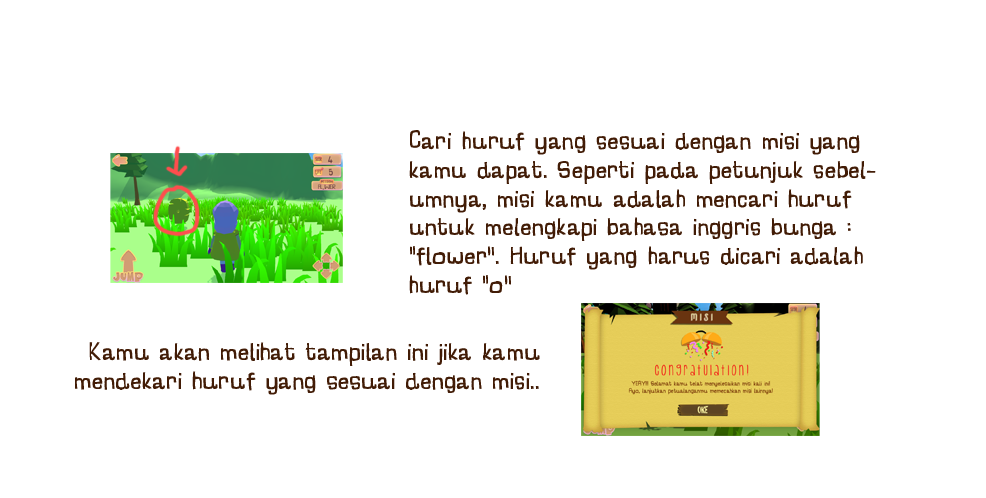
<style>
.page{position:relative;width:986px;height:498px;background:#ffffff}
.page>*{position:absolute;margin:0}
.t1{font:24px "CharlatanDEMO";letter-spacing:0.025em;color:#421c06}
</style>
<div class="page">
<p class="t1" style="left:409px;top:130px;width:467px;height:165px">Cari huruf yang sesuai dengan misi yang kamu dapat. Seperti pada petunjuk sebelumnya, misi kamu adalah mencari huruf untuk melengkapi bahasa inggris bunga : “flower”. Huruf yang harus dicari adalah huruf “o”</p>
<p class="t1" style="left:75px;top:342px;width:465px;height:53px;text-align:right">Kamu akan melihat tampilan ini jika kamu mendekari huruf yang sesuai dengan misi..</p>
</div>
